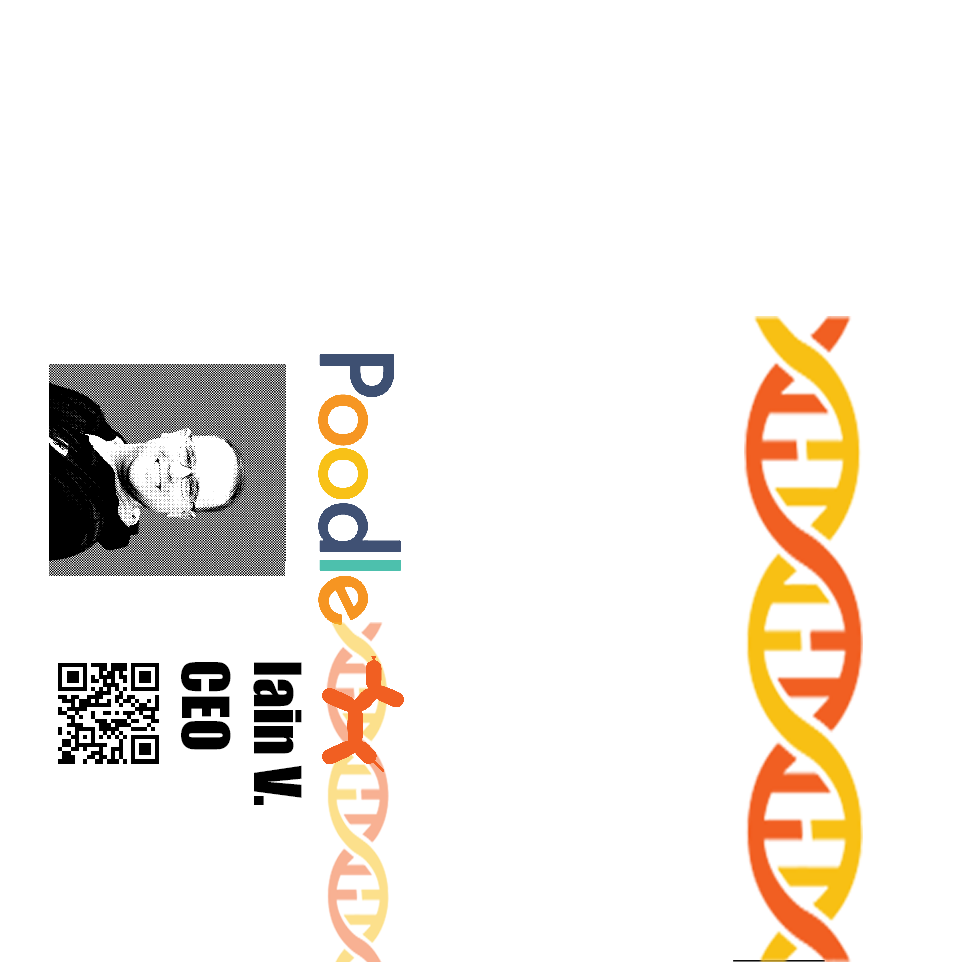
<style>
.page{position:relative;width:960px;height:962px;background:#ffffff}
.page>*{position:absolute;margin:0}
.t1{font:60px "Impact";color:#000000}
</style>
<div class="page">
<p class="t1" style="left:181px;top:662px;width:121px;height:143px;rotate:90deg">Iain V.<br>CEO</p>
</div>
